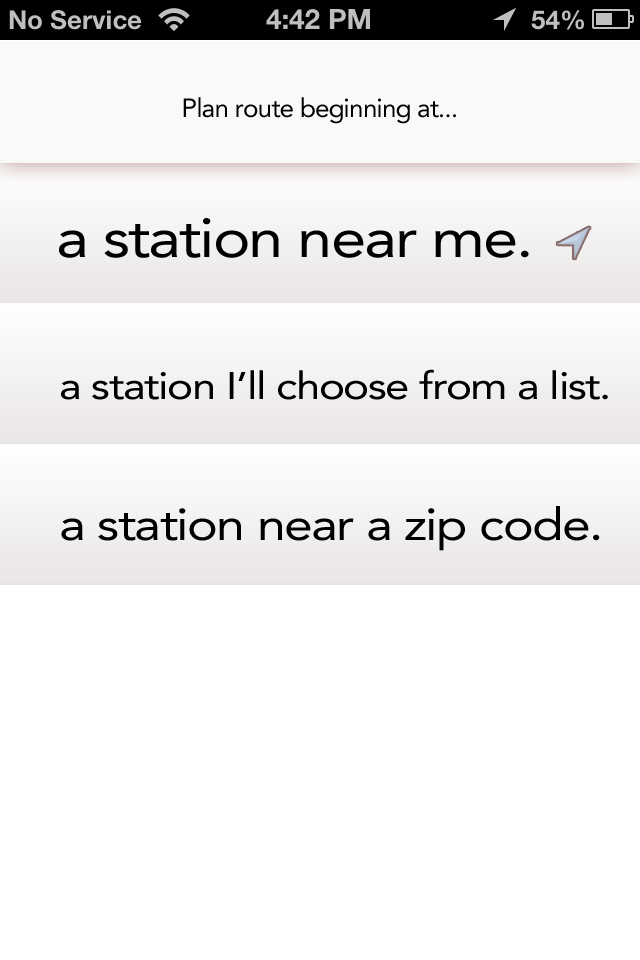
<style>
.page{position:relative;width:640px;height:960px;background:#ffffff}
.page>*{position:absolute;margin:0}
.t1{font:26px "Avenir-Roman";letter-spacing:-0.03em;color:#000000}
.t2{font:55px "Avenir-Roman";letter-spacing:-0.03em;color:#000000;scale:1.15 1}
.t3{font:38px "Avenir-Roman";letter-spacing:-0.03em;color:#000000;scale:1.15 1}
.t4{font:45px "Avenir-Roman";letter-spacing:-0.03em;color:#000000;scale:1.15 1}
</style>
<div class="page">
<p class="t1" style="left:183px;top:97px;width:273px;height:27px">Plan route beginning at...</p>
<p class="t2" style="left:59px;top:218px;width:470px;height:40px">a station near me.</p>
<p class="t3" style="left:61px;top:369px;width:547px;height:31px">a station I’ll choose from a list.</p>
<p class="t4" style="left:61px;top:506px;width:539px;height:45px">a station near a zip code.</p>
</div>
